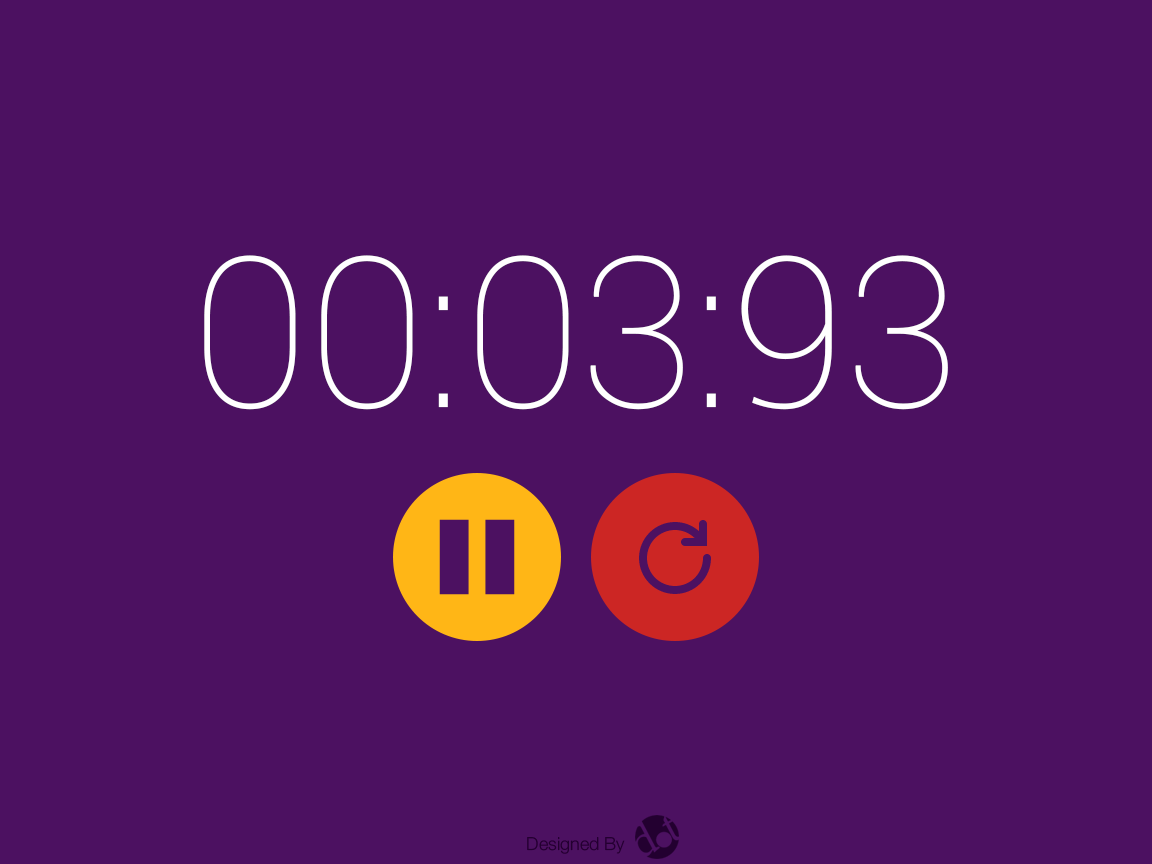
<style>
.page{position:relative;width:1152px;height:864px;background:#4c1161}
.page>*{position:absolute;margin:0}
.t1{font:210px "RobotoSlab-Thin";color:#ffffff}
.t2{font:18px "HelveticaNeue-Light";color:#230030}
</style>
<div class="page">
<p class="t1" style="left:204px;top:255px;width:744px;height:155px">00:03:93</p>
<p class="t2" style="left:527px;top:837px;width:98px;height:17px">Designed By</p>
</div>
